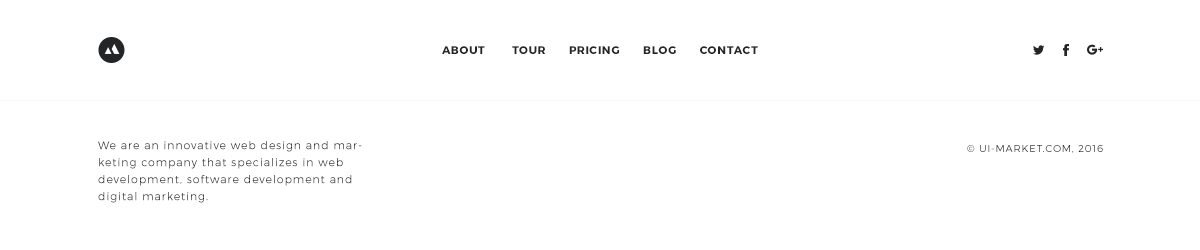
<style>
.page{position:relative;width:1200px;height:250px;background:#ffffff}
.page>*{position:absolute;margin:0}
.t1{font:11px "Montserrat-Bold";letter-spacing:0.07em;color:#242526;text-transform:uppercase}
.t2{font:11px/17px "Montserrat-Light";letter-spacing:0.08em;color:#242526}
.t3{font:10px "Montserrat-Light";letter-spacing:0.08em;color:#242526;text-transform:uppercase}
</style>
<div class="page">
<p class="t1" style="left:442px;top:46px;width:316px;height:8px">About       Tour      Pricing      Blog      Contact</p>
<p class="t2" style="left:98px;top:141px;width:264px;height:62px">We are an innovative web design and marketing company that specializes in web development, software development and digital marketing.</p>
<p class="t3" style="left:967px;top:145px;width:136px;height:8px">© UI-market.com, 2016</p>
</div>
